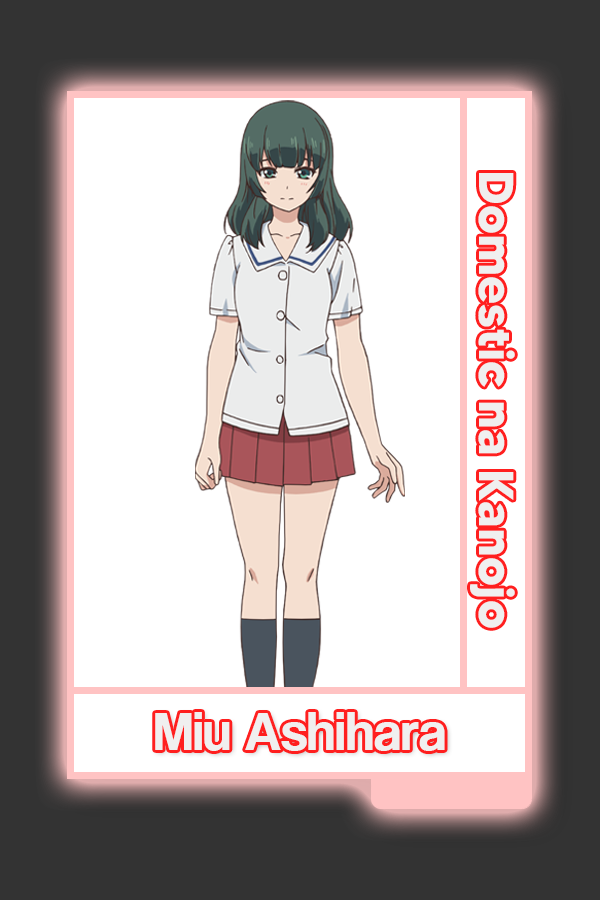
<style>
.page{position:relative;width:600px;height:900px;background:#ffffff}
.page>*{position:absolute;margin:0}
.t1{font:48.8px "MADETOMMY-Bold";color:#f0efef}
.t2{font:56.3px "CoolveticaRg-Regular";color:#f0efef}
</style>
<div class="page">
<p class="t1" style="left:470px;top:173px;width:45px;height:455px;rotate:90deg">Domestic na Kanojo</p>
<p class="t2" style="left:155px;top:712px;width:290px;height:39px">Miu Ashihara</p>
</div>
